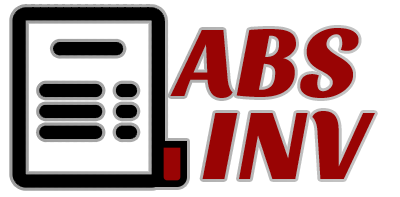
<style>
.page{position:relative;width:400px;height:197px;background:#ffffff}
.page>*{position:absolute;margin:0}
.t1{font:100px "SansitaOne";color:#990404}
</style>
<div class="page">
<p class="t1" style="left:170px;top:28px;width:189px;height:70px">ABS</p>
<p class="t1" style="left:202px;top:111px;width:173px;height:68px">INV</p>
</div>
